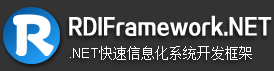
<style>
.page{position:relative;width:274px;height:71px;background:#333333}
.page>*{position:absolute;margin:0}
.t1{font:69.7px "DFPTanLiW5";color:#ffffff;font-weight:bold;scale:0.84 1}
.t2{font:22px "FZZDHJW--GB1-0";color:#ffffff;scale:0.8 1}
.t3{font:14px "SimSun";color:#ffffff}
.t4{font:14px "ArialMT";color:#ffffff}
</style>
<div class="page">
<p class="t1" style="left:13px;top:14px;width:41px;height:42px">R</p>
<p class="t2" style="left:69px;top:15px;width:203px;height:21px">RDIFramework.NET</p>
<p class="t3" style="left:70px;top:46px;width:182px;height:14px"><span class="t4">.NET</span>快速信息化系统开发框架</p>
</div>
